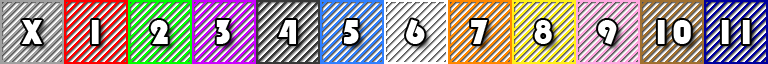
<style>
.page{position:relative;width:768px;height:64px}
.page>*{position:absolute;margin:0}
.t1{font:36px "Bauhaus93";color:#ffffff}
</style>
<div class="page">
<p class="t1" style="left:21px;top:20px;width:22px;height:24px">X</p>
<p class="t1" style="left:91px;top:20px;width:8px;height:24px">1</p>
<p class="t1" style="left:150px;top:20px;width:18px;height:24px">2</p>
<p class="t1" style="left:216px;top:20px;width:14px;height:24px">3</p>
<p class="t1" style="left:278px;top:20px;width:18px;height:24px">4</p>
<p class="t1" style="left:344px;top:20px;width:15px;height:24px">5</p>
<p class="t1" style="left:406px;top:19px;width:19px;height:25px">6</p>
<p class="t1" style="left:471px;top:20px;width:17px;height:24px">7</p>
<p class="t1" style="left:534px;top:20px;width:18px;height:24px">8</p>
<p class="t1" style="left:598px;top:20px;width:19px;height:25px">9</p>
<p class="t1" style="left:657px;top:20px;width:34px;height:24px">10</p>
<p class="t1" style="left:721px;top:20px;width:29px;height:24px">11</p>
</div>
